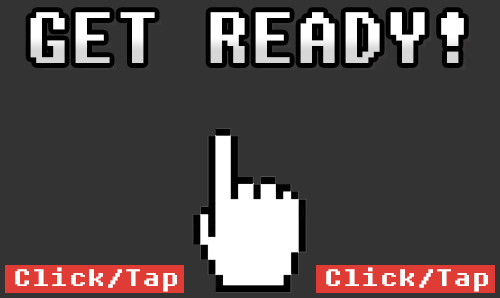
<style>
.page{position:relative;width:500px;height:298px;background:#333333}
.page>*{position:absolute;margin:0}
.t1{font:72px "Fixedsys";color:#ffffff}
.t2{font:23.7px "Fixedsys";color:#ffffff;scale:1.24 1}
</style>
<div class="page">
<p class="t1" style="left:30px;top:12px;width:434px;height:51px">GET READY!</p>
<p class="t2" style="left:15px;top:267px;width:162px;height:25px">Click/Tap</p>
<p class="t2" style="left:326px;top:267px;width:162px;height:25px">Click/Tap</p>
</div>
